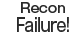
<style>
.page{position:relative;width:84px;height:37px;background:#ffffff}
.page>*{position:absolute;margin:0}
.t1{font:18px/14px "GothicMB101Pro-Medium";letter-spacing:-0.04em;color:#2a2a2a;scale:0.8 1}
.t2{font:13px/14px "GothicMB101Pro-Medium";color:#2a2a2a}
</style>
<div class="page">
<p class="t1" style="left:17px;top:2px;width:52px;height:30px;text-align:center"><span class="t2">Recon<br></span>Failure!</p>
</div>
